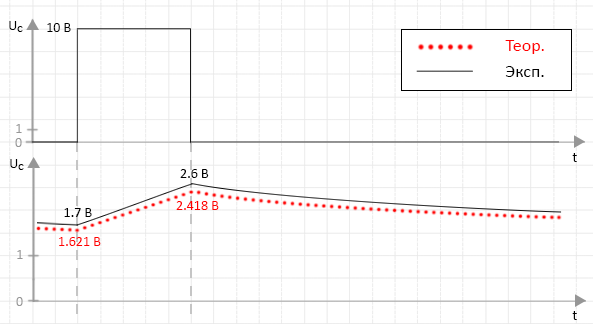
<style>
.page{position:relative;width:593px;height:324px;background:#ffffff}
.page>*{position:absolute;margin:0}
.t1{font:14px "Calibri";color:#000000}
.t2{font:10px "Calibri";color:#000000}
.t3{font:18px "Calibri";color:#ff0000}
.t4{font:18px "Calibri";color:#000000}
.t5{font:14px "Calibri";color:#969696}
.t6{font:14px "Calibri";color:#ff0000}
</style>
<div class="page">
<p class="t1" style="left:9px;top:21px;width:8px;height:9px">U</p>
<p class="t2" style="left:17px;top:26px;width:6px;height:6px">C</p>
<p class="t1" style="left:47px;top:23px;width:24px;height:9px">10 В</p>
<p class="t3" style="left:505px;top:40px;width:39px;height:14px">Теор.</p>
<p class="t4" style="left:505px;top:66px;width:39px;height:11px">Эксп.</p>
<p class="t5" style="left:16px;top:124px;width:6px;height:9px">1</p>
<p class="t5" style="left:15px;top:138px;width:7px;height:9px">0</p>
<p class="t1" style="left:10px;top:159px;width:8px;height:9px">U</p>
<p class="t1" style="left:572px;top:153px;width:5px;height:9px">t</p>
<p class="t2" style="left:18px;top:164px;width:6px;height:6px">C</p>
<p class="t1" style="left:180px;top:169px;width:29px;height:9px">2.6 В</p>
<p class="t1" style="left:64px;top:208px;width:28px;height:9px">1.7 В</p>
<p class="t6" style="left:176px;top:201px;width:43px;height:9px">2.418 В</p>
<p class="t6" style="left:59px;top:237px;width:42px;height:9px">1.621 В</p>
<p class="t5" style="left:17px;top:250px;width:6px;height:9px">1</p>
<p class="t5" style="left:16px;top:297px;width:7px;height:9px">0</p>
<p class="t1" style="left:572px;top:311px;width:5px;height:9px">t</p>
</div>
